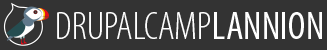
<style>
.page{position:relative;width:327px;height:50px;background:#333333}
.page>*{position:absolute;margin:0}
.t1{font:39.9px "MyriadPro-LightCond";color:#ffffff;text-transform:uppercase}
.t2{font:39.9px "MyriadPro-Cond";color:#ffffff;text-transform:uppercase}
</style>
<div class="page">
<p class="t1" style="left:57px;top:12px;width:265px;height:27px">Drupalcamp<span class="t2">Lannion</span></p>
</div>
